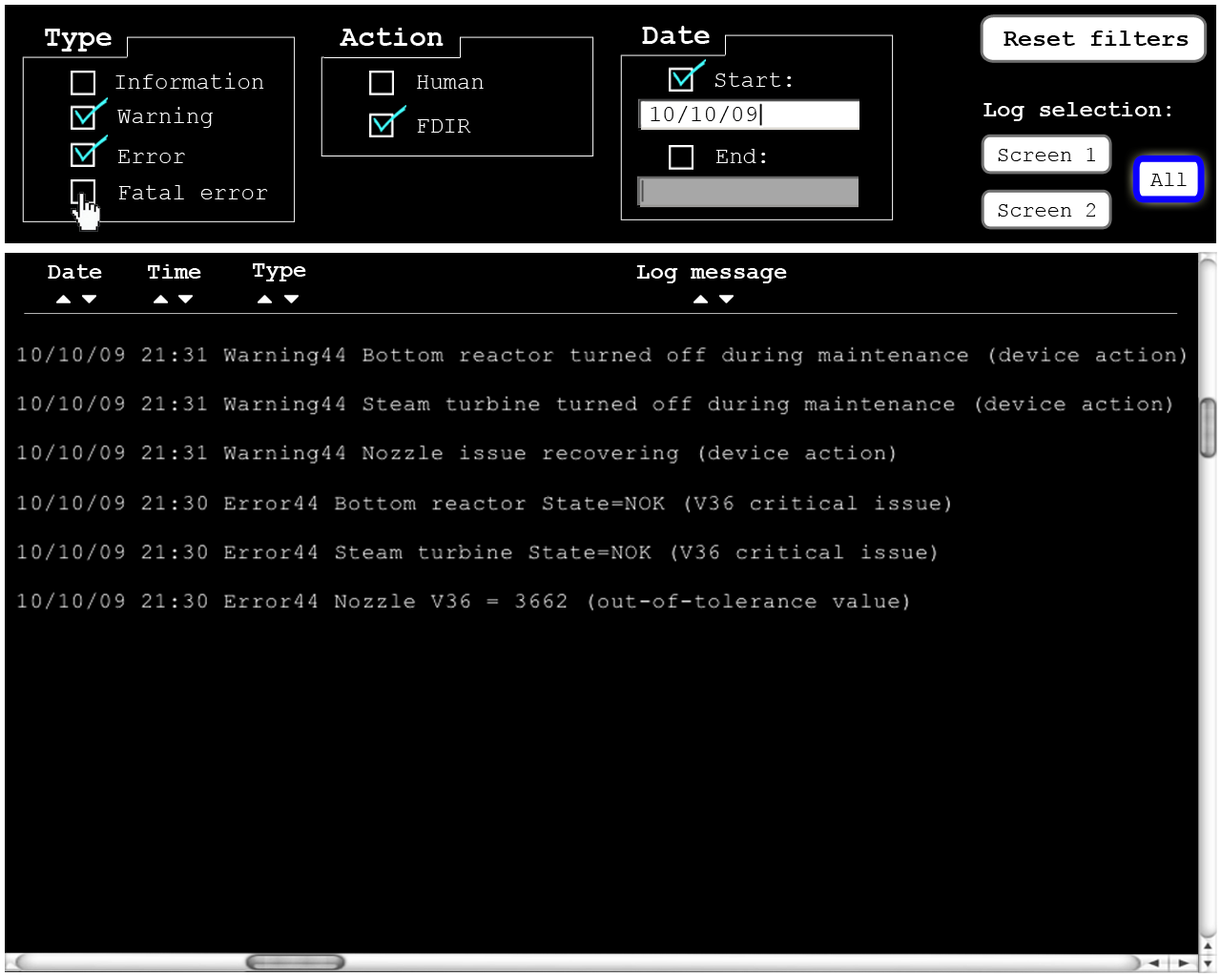
<style>
.page{position:relative;width:1221px;height:977px;background:#000000}
.page>*{position:absolute;margin:0}
.t1{font:28.6px "CourierNewPS-BoldMT";color:#ffffff}
.t2{font:23.8px "CourierNewPS-BoldMT";color:#000000}
.t3{font:22.9px "CourierNewPSMT";color:#ffffff}
.t4{font:22.9px "CourierNewPSMT";color:#000000}
.t5{font:22.9px "CourierNewPS-BoldMT";color:#ffffff}
.t6{font:21px "CourierNewPSMT";color:#000000}
</style>
<div class="page">
<p class="t1" style="left:45px;top:29px;width:67px;height:23px">Type</p>
<p class="t1" style="left:340px;top:28px;width:104px;height:18px">Action</p>
<p class="t1" style="left:642px;top:26px;width:68px;height:18px">Date</p>
<p class="t2" style="left:1003px;top:31px;width:185px;height:15px">Reset filters</p>
<p class="t3" style="left:115px;top:72px;width:149px;height:17px">Information</p>
<p class="t3" style="left:417px;top:75px;width:67px;height:14px">Human</p>
<p class="t3" style="left:715px;top:72px;width:77px;height:15px">Start:</p>
<p class="t3" style="left:117px;top:107px;width:96px;height:21px">Warning</p>
<p class="t4" style="left:650px;top:106px;width:106px;height:17px">10/10/09</p>
<p class="t5" style="left:983px;top:102px;width:187px;height:19px">Log selection:</p>
<p class="t3" style="left:417px;top:119px;width:54px;height:14px">FDIR</p>
<p class="t3" style="left:118px;top:150px;width:67px;height:13px">Error</p>
<p class="t3" style="left:716px;top:149px;width:50px;height:14px">End:</p>
<p class="t6" style="left:998px;top:148px;width:97px;height:13px">Screen 1</p>
<p class="t6" style="left:1150px;top:173px;width:37px;height:13px">All</p>
<p class="t3" style="left:118px;top:185px;width:150px;height:14px">Fatal error</p>
<p class="t6" style="left:998px;top:203px;width:97px;height:14px">Screen 2</p>
<p class="t5" style="left:48px;top:264px;width:54px;height:15px">Date</p>
<p class="t5" style="left:148px;top:264px;width:53px;height:15px">Time</p>
<p class="t5" style="left:253px;top:263px;width:53px;height:18px">Type</p>
<p class="t5" style="left:636px;top:265px;width:151px;height:18px">Log message</p>
</div>
